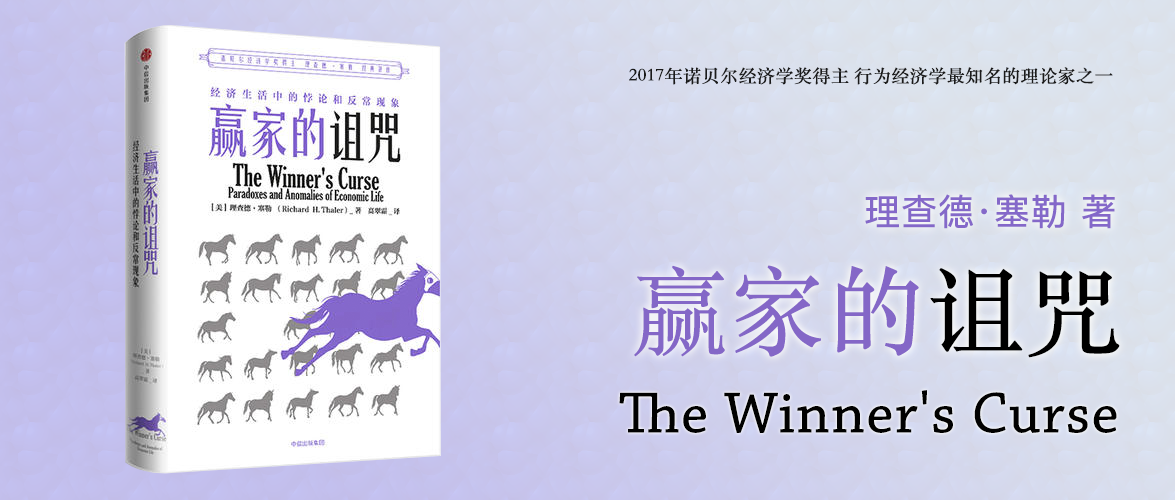
<style>
.page{position:relative;width:1175px;height:500px}
.page>*{position:absolute;margin:0}
.t1{font:18px "STSongti-SC-Regular";color:#1a1a1a;font-weight:bold}
.t2{font:36px "PingFangSC-Regular";color:#8468c9;font-weight:bold}
.t3{font:96px "STSongti-SC-Regular";color:#8467c7;font-weight:bold}
.t4{font:96px "STSongti-SC-Regular";color:#000000;font-weight:bold}
.t5{font:60px "ChaparralPro-Regular";color:#010101;font-weight:bold}
</style>
<div class="page">
<p class="t1" style="left:629px;top:67px;width:484px;height:18px">2017年诺贝尔经济学奖得主 行为经济学最知名的理论家之一</p>
<p class="t2" style="left:865px;top:194px;width:250px;height:35px">理查德·塞勒 著</p>
<p class="t3" style="left:634px;top:265px;width:486px;height:93px">赢家的<span class="t4">诅咒</span></p>
<p class="t5" style="left:619px;top:390px;width:498px;height:43px">The Winner's Curse</p>
</div>
